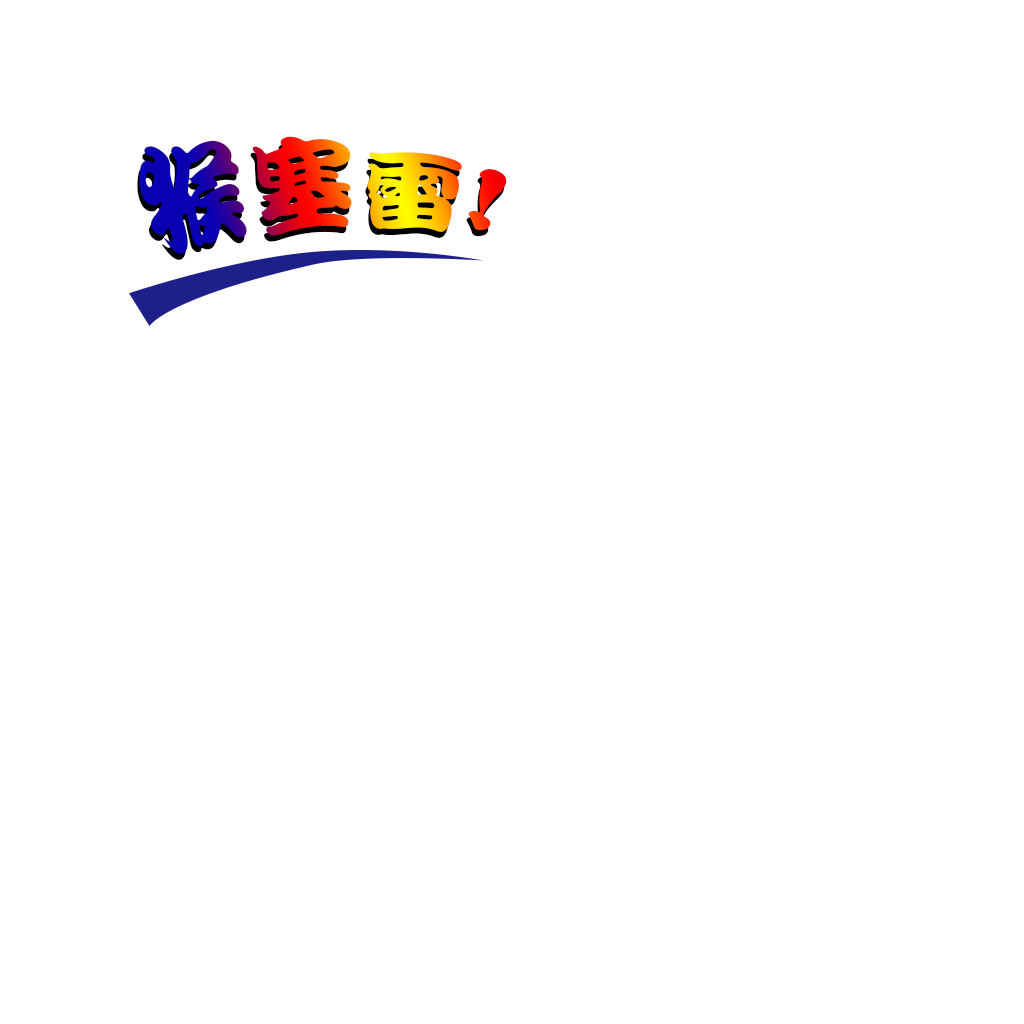
<style>
.page{position:relative;width:1024px;height:1024px;background:#ffffff}
.page>*{position:absolute;margin:0}
.t1{font:98.3px "HanWangKanTan";letter-spacing:0.01em}
</style>
<div class="page">
<p class="t1" style="left:139px;top:136px;width:368px;height:118px">猴塞雷!</p>
<p class="t1" style="left:137px;top:142px;width:368px;height:118px">猴塞雷!</p>
</div>
